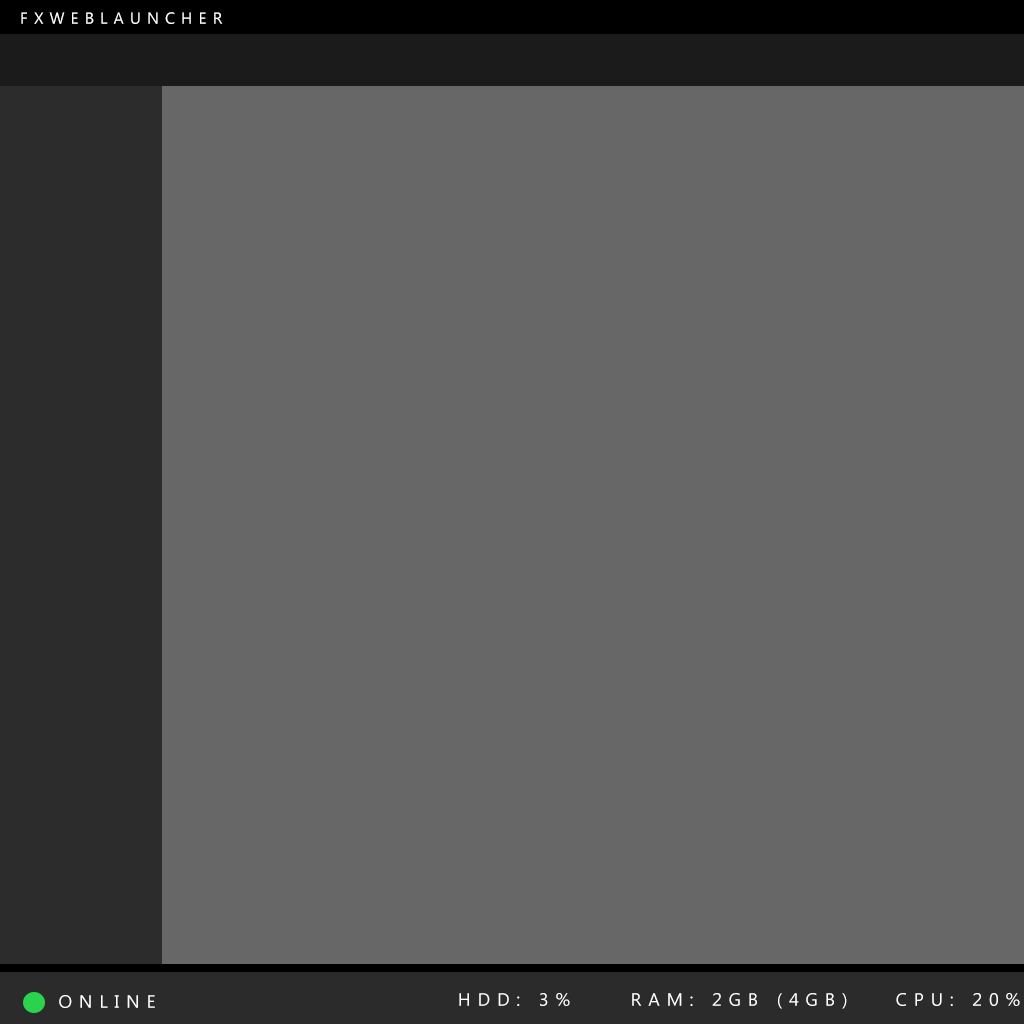
<style>
.page{position:relative;width:1024px;height:1024px;background:#676767}
.page>*{position:absolute;margin:0}
.t1{font:16px "MicrosoftTaiLe";letter-spacing:0.38em;color:#ffffff;text-transform:uppercase}
.t2{font:18px "MicrosoftTaiLe";letter-spacing:0.38em;color:#ffffff;text-transform:uppercase}
</style>
<div class="page">
<p class="t1" style="left:21px;top:12px;width:202px;height:12px">fxWEBLAUNCHER</p>
<p class="t2" style="left:59px;top:995px;width:96px;height:13px">ONLINE</p>
<p class="t2" style="left:459px;top:993px;width:111px;height:13px">HDD: 3%</p>
<p class="t2" style="left:632px;top:993px;width:215px;height:16px">RAM: 2GB (4GB)</p>
<p class="t2" style="left:896px;top:993px;width:124px;height:13px">cpu: 20%</p>
</div>
